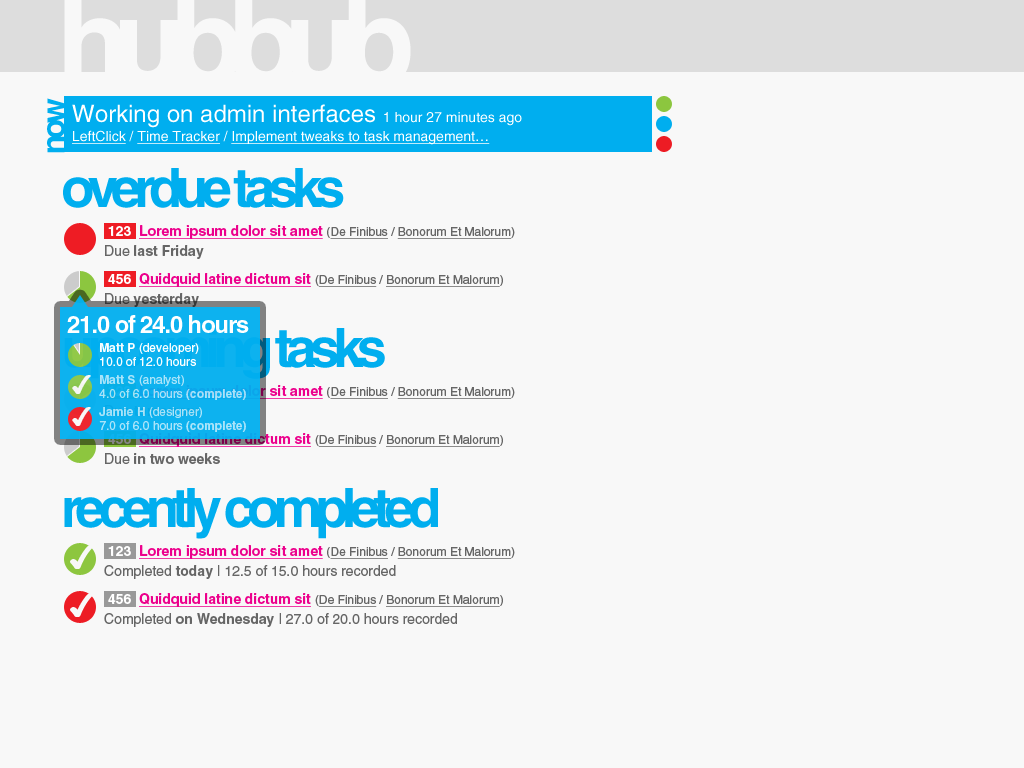
<style>
.page{position:relative;width:1024px;height:768px;background:#f8f8f8}
.page>*{position:absolute;margin:0}
.t1{font:32px "HelveticaLTStd-Bold";letter-spacing:-0.125em;color:#00aeef}
.t2{font:24px "HelveticaLTStd-Roman";color:#ffffff}
.t3{font:14px "HelveticaLTStd-Roman";color:#ffffff}
.t4{font:14px "HelveticaLTStd-Roman";color:#ffffff;text-decoration:underline}
.t5{font:54.4px "HelveticaLTStd-Bold";letter-spacing:-0.125em;color:#00aeef}
.t6{font:14px/20px "HelveticaLTStd-Bold";color:#ec008c;text-decoration:underline}
.t7{font:14px/20px "HelveticaLTStd-Bold";color:#00aeef}
.t8{font:14px/20px "HelveticaLTStd-Bold";color:#ffffff}
.t9{font:12px/20px "HelveticaLTStd-Roman";color:#666666}
.t10{font:12px/20px "HelveticaLTStd-Roman";color:#666666;text-decoration:underline}
.t11{font:14px/20px "HelveticaLTStd-Roman";color:#666666}
.t12{font:14px/20px "HelveticaLTStd-Bold";color:#666666}
.t13{font:24px "HelveticaLTStd-Bold";letter-spacing:-0.05em;color:#ffffff}
.t14{font:12px/14px "HelveticaLTStd-Roman";color:#ffffff}
.t15{font:12px/14px "HelveticaLTStd-Bold";color:#ffffff}
.t16{font:23.9px "ArialUnicodeMS";color:#f8f8f8}
.t17{font:12px/14px "HelveticaLTStd-Roman";color:#aae4f9}
.t18{font:12px/14px "HelveticaLTStd-Bold";color:#aae4f9}
.t19{font:14px/20px "HelveticaLTStd-Bold";text-decoration:underline}
.t20{font:14px/20px "HelveticaLTStd-Bold"}
.t21{font:12px/20px "HelveticaLTStd-Roman"}
.t22{font:12px/20px "HelveticaLTStd-Roman";text-decoration:underline}
.t23{font:14px/20px "HelveticaLTStd-Roman"}
.t24{font:30.7px "ArialUnicodeMS";color:#f8f8f8}
</style>
<div class="page">
<p class="t1" style="left:47px;top:98px;width:18px;height:55px;rotate:-90deg">now</p>
<p class="t2" style="left:72px;top:104px;width:450px;height:24px">Working on admin interfaces <span class="t3">1 hour 27 minutes ago</span></p>
<p class="t4" style="left:72px;top:130px;width:418px;height:15px">LeftClick<span class="t3"> / </span>Time Tracker<span class="t3"> / </span>Implement tweaks to task management…</p>
<p class="t5" style="left:63px;top:168px;width:281px;height:40px">overdue tasks</p>
<p class="t6" style="left:105px;top:225px;width:410px;height:34px"><span class="t7"> </span><span class="t8">123  </span>Lorem ipsum dolor sit amet <span class="t9">(</span><span class="t10">De Finibus</span><span class="t9"> / </span><span class="t10">Bonorum Et Malorum</span><span class="t9">)<br></span><span class="t11">Due </span><span class="t12">last Friday</span></p>
<p class="t6" style="left:105px;top:273px;width:398px;height:34px"><span class="t7"> </span><span class="t8">456  </span>Quidquid latine dictum sit <span class="t9">(</span><span class="t10">De Finibus</span><span class="t9"> / </span><span class="t10">Bonorum Et Malorum</span><span class="t9">)<br></span><span class="t11">Due</span><span class="t12"> yesterday</span></p>
<p class="t13" style="left:67px;top:315px;width:182px;height:18px">21.0 of 24.0 hours</p>
<p class="t5" style="left:64px;top:327px;width:321px;height:52px">upcoming tasks</p>
<p class="t14" style="left:100px;top:343px;width:99px;height:23px"><span class="t15">Matt P</span> (developer)<br>10.0 of 12.0 hours</p>
<p class="t16" style="left:72px;top:375px;width:19px;height:19px">✔</p>
<p class="t17" style="left:99px;top:375px;width:147px;height:25px"><span class="t18">Matt S</span> (analyst)<br>4.0 of 6.0 hours <span class="t18">(complete)</span></p>
<p class="t19" style="left:105px;top:385px;width:410px;height:31px"><span class="t20"> </span><span class="t20">123  </span>Lorem ipsum dolor sit amet <span class="t21">(</span><span class="t22">De Finibus</span><span class="t21"> / </span><span class="t22">Bonorum Et Malorum</span><span class="t21">)<br></span><span class="t23">Due </span><span class="t20">tomorrow</span></p>
<p class="t16" style="left:72px;top:407px;width:19px;height:19px">✔</p>
<p class="t17" style="left:99px;top:407px;width:147px;height:25px"><span class="t18">Jamie H</span> (designer)<br>7.0 of 6.0 hours <span class="t18">(complete)</span></p>
<p class="t6" style="left:105px;top:433px;width:398px;height:31px"><span class="t7"> </span><span class="t8">456  </span>Quidquid latine dictum sit <span class="t9">(</span><span class="t10">De Finibus</span><span class="t9"> / </span><span class="t10">Bonorum Et Malorum</span><span class="t9">)<br></span><span class="t11">Due</span><span class="t12"> in two weeks</span></p>
<p class="t5" style="left:64px;top:488px;width:374px;height:51px">recently completed</p>
<p class="t24" style="left:70px;top:545px;width:24px;height:24px">✔</p>
<p class="t11" style="left:104px;top:545px;width:411px;height:34px"><span class="t7"> </span><span class="t8">123  </span><span class="t6">Lorem ipsum dolor sit amet </span><span class="t9">(</span><span class="t10">De Finibus</span><span class="t9"> / </span><span class="t10">Bonorum Et Malorum</span><span class="t9">)<br></span>Completed <span class="t12">today</span> | 12.5 of 15.0 hours recorded</p>
<p class="t24" style="left:70px;top:593px;width:24px;height:24px">✔</p>
<p class="t11" style="left:104px;top:593px;width:399px;height:34px"><span class="t7"> </span><span class="t8">456  </span><span class="t6">Quidquid latine dictum sit </span><span class="t9">(</span><span class="t10">De Finibus</span><span class="t9"> / </span><span class="t10">Bonorum Et Malorum</span><span class="t9">)<br></span>Completed <span class="t12">on Wednesday</span> | 27.0 of 20.0 hours recorded</p>
</div>
